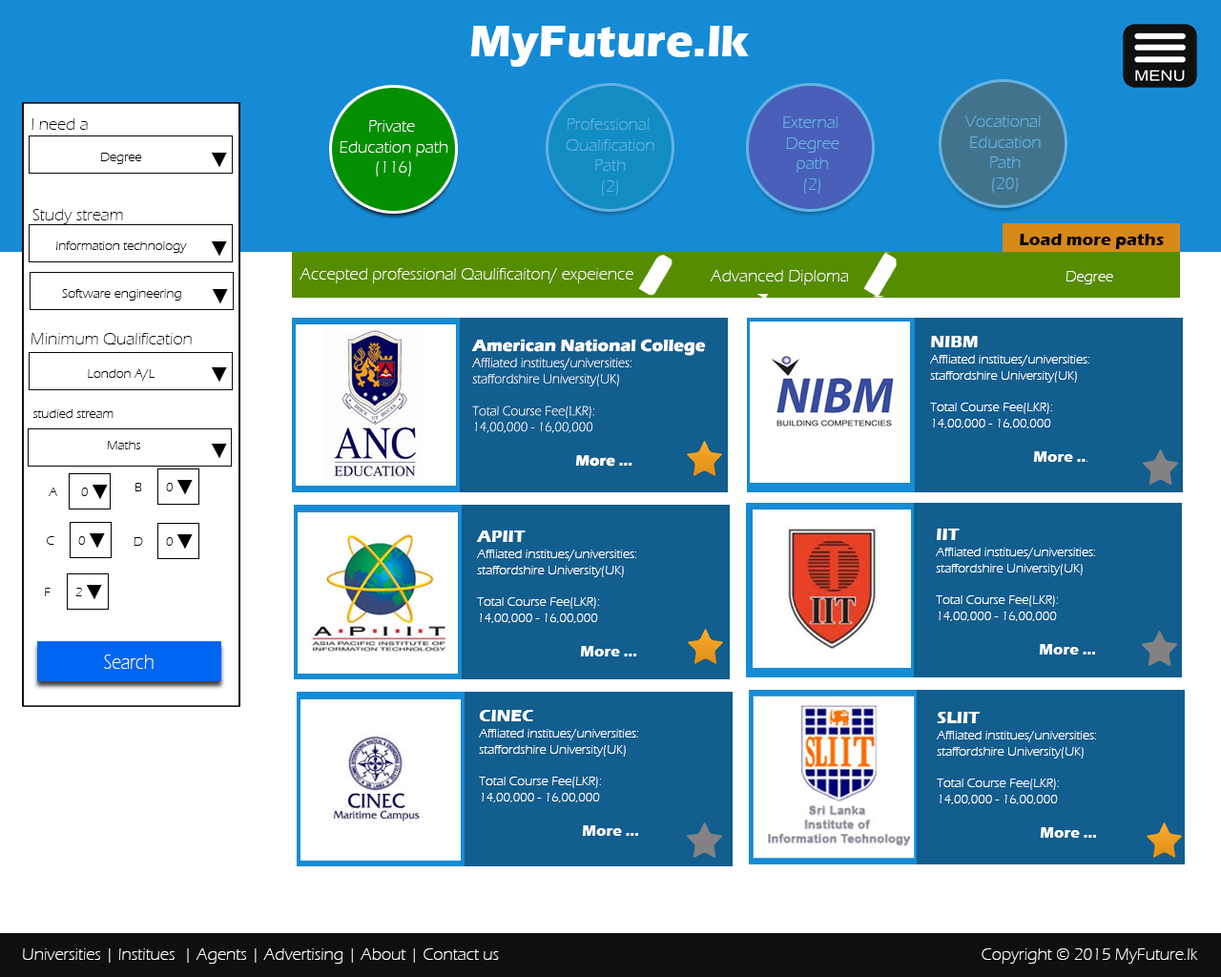
<style>
.page{position:relative;width:1221px;height:977px;background:#ffffff}
.page>*{position:absolute;margin:0}
.t1{font:45.8px "ErasITC-Bold";color:#ffffff}
.t2{font:17.2px "ErasITC-Light";color:#090909}
.t3{font:17.2px "ErasITC-Light";color:#fffefe}
.t4{font:17.2px "ErasITC-Light";color:#63b1e3}
.t5{font:17.2px "ErasITC-Light";color:#65b2e3}
.t6{font:13.4px "ErasITC-Light";color:#090909}
.t7{font:17.2px "ErasITC-Bold";color:#000000}
.t8{font:15px "ErasITC-Light";color:#fffefe}
.t9{font:13.4px "ErasITC-Light";color:#ffffff}
.t10{font:17.2px "ErasITC-Bold";color:#ffffff}
.t11{font:15.3px "ErasITC-Bold";color:#ffffff}
.t12{font:21.6px "ErasITC-Light";color:#ffffff;scale:0.83 1}
.t13{font:17.2px "ErasITC-Light";color:#ffffff}
</style>
<div class="page">
<p class="t1" style="left:470px;top:26px;width:279px;height:41px">MyFuture.lk</p>
<p class="t2" style="left:31px;top:118px;width:57px;height:12px">I need a</p>
<p class="t3" style="left:340px;top:120px;width:108px;height:56px;text-align:center">Private <br>Education path<br>(116)</p>
<p class="t4" style="left:566px;top:118px;width:88px;height:78px;text-align:center">Professional <br>Qualification<br>Path<br>(2)</p>
<p class="t5" style="left:783px;top:116px;width:56px;height:78px;text-align:center">External <br>Degree<br>path<br>(2)</p>
<p class="t5" style="left:965px;top:115px;width:76px;height:78px;text-align:center">Vocational <br>Education<br>Path<br>(20)</p>
<p class="t6" style="left:100px;top:153px;width:42px;height:11px">Degree</p>
<p class="t2" style="left:32px;top:209px;width:91px;height:15px">Study stream</p>
<p class="t7" style="left:1020px;top:234px;width:144px;height:15px">Load more paths</p>
<p class="t6" style="left:56px;top:241px;width:131px;height:12px">Information technology</p>
<p class="t3" style="left:299px;top:268px;width:334px;height:15px">Accepted professional Qaulificaiton/ expeience</p>
<p class="t3" style="left:710px;top:270px;width:138px;height:15px">Advanced Diploma</p>
<p class="t8" style="left:1066px;top:271px;width:47px;height:13px">Degree</p>
<p class="t6" style="left:62px;top:289px;width:119px;height:11px">Software engineering</p>
<p class="t2" style="left:31px;top:333px;width:161px;height:11px">Minimum Qualification</p>
<p class="t9" style="left:471px;top:339px;width:235px;height:127px"><span class="t10">American National College<br></span>Affliated institues/universities:<br>staffordshire University(UK)<br><br>Total Course Fee(LKR):<br>14,00,000 - 16,00,000 <br><br>   <span class="t11">More ...</span></p>
<p class="t9" style="left:930px;top:336px;width:159px;height:126px"><span class="t10">NIBM<br></span>Affliated institues/universities:<br>staffordshire University(UK)<br><br>Total Course Fee(LKR):<br>14,00,000 - 16,00,000 <br><br>   <span class="t11">More ..</span>.</p>
<p class="t6" style="left:88px;top:369px;width:67px;height:12px">London A/L</p>
<p class="t6" style="left:32px;top:409px;width:82px;height:9px">studied stream</p>
<p class="t6" style="left:107px;top:441px;width:33px;height:8px">Maths</p>
<p class="t6" style="left:134px;top:483px;width:8px;height:8px">B</p>
<p class="t6" style="left:166px;top:483px;width:7px;height:8px">0</p>
<p class="t6" style="left:49px;top:487px;width:8px;height:9px">A</p>
<p class="t6" style="left:81px;top:487px;width:7px;height:9px">0</p>
<p class="t9" style="left:476px;top:530px;width:161px;height:126px"><span class="t10">APIIT<br></span>Affliated institues/universities:<br>staffordshire University(UK)<br><br>Total Course Fee(LKR):<br>14,00,000 - 16,00,000 <br><br>   <span class="t11">More ...</span></p>
<p class="t9" style="left:936px;top:528px;width:160px;height:126px"><span class="t10">IIT<br></span>Affliated institues/universities:<br>staffordshire University(UK)<br><br>Total Course Fee(LKR):<br>14,00,000 - 16,00,000 <br><br><span class="t11">   More ...</span></p>
<p class="t6" style="left:47px;top:536px;width:7px;height:9px">C</p>
<p class="t6" style="left:78px;top:536px;width:7px;height:9px">0</p>
<p class="t6" style="left:134px;top:537px;width:9px;height:9px">D</p>
<p class="t6" style="left:166px;top:537px;width:7px;height:9px">0</p>
<p class="t6" style="left:45px;top:588px;width:6px;height:8px">F</p>
<p class="t6" style="left:75px;top:588px;width:7px;height:8px">2</p>
<p class="t12" style="left:104px;top:654px;width:50px;height:15px">Search</p>
<p class="t9" style="left:479px;top:710px;width:160px;height:126px"><span class="t10">CINEC<br></span>Affliated institues/universities:<br>staffordshire University(UK)<br><br>Total Course Fee(LKR):<br>14,00,000 - 16,00,000 <br><br>   <span class="t11">More ...</span></p>
<p class="t9" style="left:937px;top:712px;width:160px;height:125px"><span class="t10">SLIIT<br></span>Affliated institues/universities:<br>staffordshire University(UK)<br><br>Total Course Fee(LKR):<br>14,00,000 - 16,00,000 <br><br>   <span class="t11">More ...</span></p>
<p class="t13" style="left:23px;top:948px;width:476px;height:15px">Universities | Institues  | Agents | Advertising | About | Contact us</p>
<p class="t13" style="left:981px;top:948px;width:217px;height:15px">Copyright © 2015 MyFuture.lk</p>
</div>
